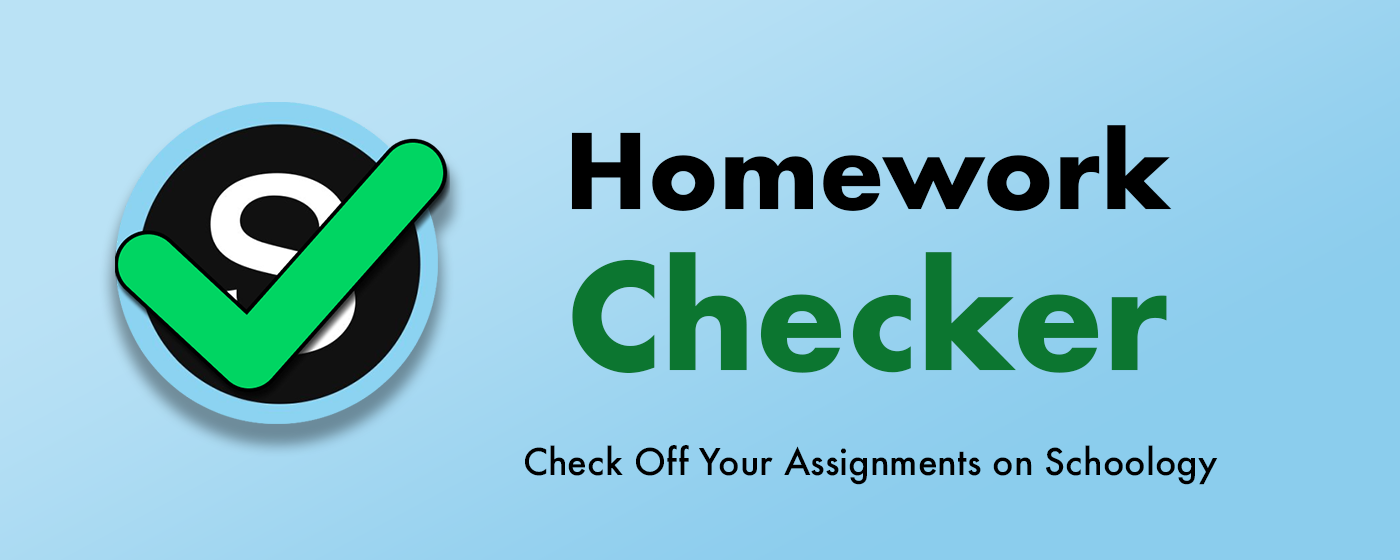
<style>
.page{position:relative;width:1400px;height:560px}
.page>*{position:absolute;margin:0}
.t1{font:101.1px/161.4px "Futura-Bold";color:#000000}
.t2{font:142px/161.4px "Futura-Bold";color:#0c7630}
.t3{font:35.8px "Futura-Medium";color:#000000}
</style>
<div class="page">
<p class="t1" style="left:571px;top:125px;width:601px;height:248px;text-align:center">Homework<br><span class="t2">Checker</span></p>
<p class="t3" style="left:525px;top:445px;width:693px;height:40px">Check Off Your Assignments on Schoology</p>
</div>
